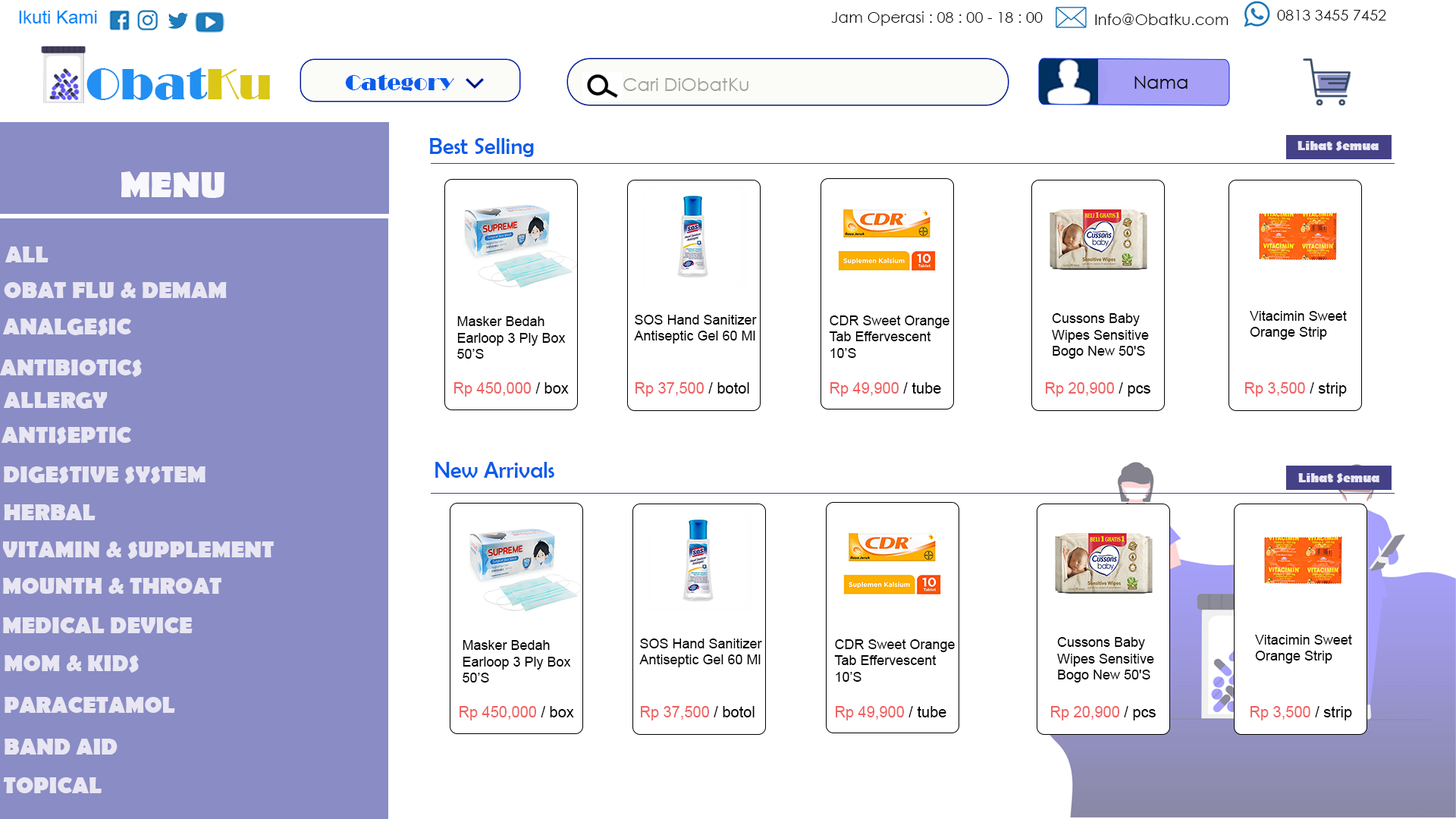
<style>
.page{position:relative;width:1456px;height:819px;background:#ffffff}
.page>*{position:absolute;margin:0}
.t1{font:18.2px "ArialMT";color:#0586f8}
.t2{font:15.2px "CenturyGothic";color:#0a0a0a}
.t3{font:45.5px "Broadway";color:#2190f2}
.t4{font:45.5px "Broadway";color:#dbc716}
.t5{font:22.7px "Broadway";color:#085cec}
.t6{font:18.2px "CenturyGothic";color:#0d0d0d}
.t7{font:18.2px "CenturyGothic";color:#a2a2a0}
.t8{font:22.7px "BerlinSansFB-Reg";color:#085cec}
.t9{font:13.6px "BerlinSansFB-Bold";color:#e8e6f2}
.t10{font:36.4px "BerlinSansFB-Bold";color:#f8f7fb}
.t11{font:22.7px "BerlinSansFB-Bold";color:#e8e6f2}
.t12{font:13.6px "ArialMT";color:#000000}
.t13{font:15.2px "ArialMT";color:#ef6060}
.t14{font:15.2px "ArialMT";color:#000000}
</style>
<div class="page">
<p class="t1" style="left:19px;top:10px;width:78px;height:14px">Ikuti Kami</p>
<p class="t2" style="left:831px;top:11px;width:212px;height:15px">Jam Operasi : 08 : 00 - 18 : 00</p>
<p class="t2" style="left:1095px;top:14px;width:133px;height:11px">Info@Obatku.com</p>
<p class="t2" style="left:1277px;top:10px;width:109px;height:10px">0813 3455 7452</p>
<p class="t3" style="left:86px;top:67px;width:184px;height:33px">Obat<span class="t4">Ku</span></p>
<p class="t5" style="left:345px;top:74px;width:109px;height:17px">Category</p>
<p class="t6" style="left:1134px;top:76px;width:54px;height:13px">Nama</p>
<p class="t7" style="left:623px;top:78px;width:125px;height:13px">Cari DiObatKu</p>
<p class="t8" style="left:430px;top:138px;width:104px;height:19px">Best Selling</p>
<p class="t9" style="left:1297px;top:141px;width:82px;height:10px">Lihat Semua</p>
<p class="t10" style="left:121px;top:171px;width:103px;height:27px">MENU</p>
<p class="t11" style="left:5px;top:246px;width:44px;height:16px">ALL</p>
<p class="t11" style="left:4px;top:282px;width:223px;height:16px">OBAT FLU &amp; DEMAM</p>
<p class="t12" style="left:457px;top:316px;width:109px;height:43px">Masker Bedah<br>Earloop 3 Ply Box<br>50’S</p>
<p class="t12" style="left:634px;top:315px;width:123px;height:29px">SOS Hand Sanitizer<br>Antiseptic Gel 60 Ml</p>
<p class="t12" style="left:829px;top:315px;width:120px;height:43px">CDR Sweet Orange<br>Tab Effervescent<br>10’S</p>
<p class="t12" style="left:1052px;top:313px;width:97px;height:46px">Cussons Baby<br>Wipes Sensitive<br>Bogo New 50'S</p>
<p class="t12" style="left:1250px;top:311px;width:97px;height:29px">Vitacimin Sweet<br>Orange Strip</p>
<p class="t11" style="left:3px;top:318px;width:128px;height:18px">ANALGESIC</p>
<p class="t11" style="left:0px;top:359px;width:142px;height:18px">ANTIBIOTICS</p>
<p class="t13" style="left:454px;top:382px;width:115px;height:15px">Rp 450,000<span class="t14"> / box</span></p>
<p class="t13" style="left:635px;top:382px;width:114px;height:15px">Rp 37,500<span class="t14"> / botol</span></p>
<p class="t13" style="left:830px;top:382px;width:111px;height:15px">Rp 49,900<span class="t14"> / tube</span></p>
<p class="t13" style="left:1046px;top:382px;width:104px;height:15px">Rp 20,900<span class="t14"> / pcs</span></p>
<p class="t13" style="left:1245px;top:382px;width:102px;height:15px">Rp 3,500<span class="t14"> / strip</span></p>
<p class="t11" style="left:4px;top:392px;width:104px;height:17px">ALLERGY</p>
<p class="t11" style="left:2px;top:427px;width:129px;height:17px">ANTISEPTIC</p>
<p class="t8" style="left:435px;top:462px;width:119px;height:16px">New Arrivals</p>
<p class="t11" style="left:4px;top:466px;width:202px;height:18px">DIGESTIVE SYSTEM</p>
<p class="t9" style="left:1298px;top:473px;width:81px;height:10px">Lihat Semua</p>
<p class="t11" style="left:4px;top:504px;width:92px;height:16px">HERBAL</p>
<p class="t11" style="left:2px;top:541px;width:272px;height:18px">VITAMIN &amp; SUPPLEMENT</p>
<p class="t11" style="left:3px;top:578px;width:218px;height:16px">MOUNTH &amp; THROAT</p>
<p class="t11" style="left:3px;top:617px;width:190px;height:16px">MEDICAL DEVICE</p>
<p class="t12" style="left:463px;top:640px;width:108px;height:42px">Masker Bedah<br>Earloop 3 Ply Box<br>50’S</p>
<p class="t12" style="left:639px;top:639px;width:123px;height:28px">SOS Hand Sanitizer<br>Antiseptic Gel 60 Ml</p>
<p class="t12" style="left:834px;top:639px;width:121px;height:43px">CDR Sweet Orange<br>Tab Effervescent<br>10’S</p>
<p class="t12" style="left:1057px;top:637px;width:97px;height:45px">Cussons Baby<br>Wipes Sensitive<br>Bogo New 50'S</p>
<p class="t12" style="left:1255px;top:635px;width:97px;height:29px">Vitacimin Sweet<br>Orange Strip</p>
<p class="t11" style="left:5px;top:655px;width:134px;height:18px">MOM &amp; KIDS</p>
<p class="t11" style="left:5px;top:697px;width:170px;height:16px">PARACETAMOL</p>
<p class="t13" style="left:460px;top:706px;width:114px;height:14px">Rp 450,000<span class="t14"> / box</span></p>
<p class="t13" style="left:641px;top:706px;width:114px;height:14px">Rp 37,500<span class="t14"> / botol</span></p>
<p class="t13" style="left:836px;top:706px;width:110px;height:14px">Rp 49,900<span class="t14"> / tube</span></p>
<p class="t13" style="left:1051px;top:706px;width:105px;height:14px">Rp 20,900<span class="t14"> / pcs</span></p>
<p class="t13" style="left:1250px;top:706px;width:102px;height:14px">Rp 3,500<span class="t14"> / strip</span></p>
<p class="t11" style="left:5px;top:739px;width:113px;height:16px">BAND AID</p>
<p class="t11" style="left:3px;top:777px;width:99px;height:16px">TOPICAL</p>
</div>
